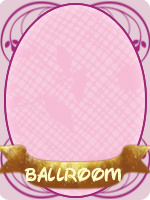
<style>
.page{position:relative;width:150px;height:200px}
.page>*{position:absolute;margin:0}
.t1{font:37.4px "Waltograph";color:#fcfac7}
</style>
<div class="page">
<p class="t1" style="left:24px;top:166px;width:97px;height:16px">ballroom</p>
</div>
